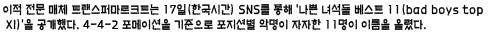
<style>
.page{position:relative;width:489px;height:37px;background:#ffffff}
.page>*{position:absolute;margin:0}
.t1{font:12.5px "H2mkpB";color:#000000;scale:0.78 1}
</style>
<div class="page">
<p class="t1" style="left:3px;top:3px;width:480px;height:28px">이적 전문 매체 트랜스퍼마르크트는 17일(한국시간) SNS를 통해 '나쁜 녀석들 베스트 11(bad boys top<br> XI)'을 공개했다. 4-4-2 포메이션을 기준으로 포지션별 악명이 자자한 11명이 이름을 올렸다.</p>
</div>
